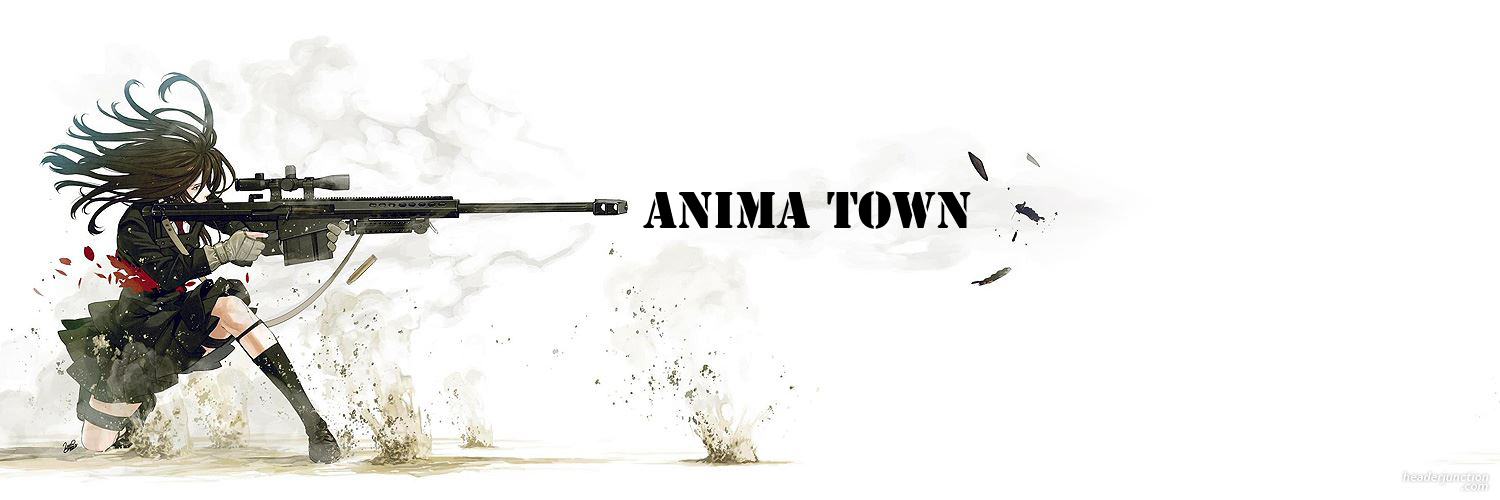
<style>
.page{position:relative;width:1500px;height:500px;background:#ffffff}
.page>*{position:absolute;margin:0}
.t1{font:48px "StencilStd";color:#000000}
</style>
<div class="page">
<p class="t1" style="left:643px;top:191px;width:328px;height:38px">Anima Town</p>
</div>
